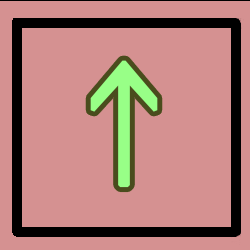
<style>
.page{position:relative;width:250px;height:250px;background:#d59191}
.page>*{position:absolute;margin:0}
.t1{font:150px "BIZ-UDMincho-Medium";color:#98ff87;font-weight:bold}
</style>
<div class="page">
<p class="t1" style="left:90px;top:60px;width:68px;height:128px">↑</p>
</div>
